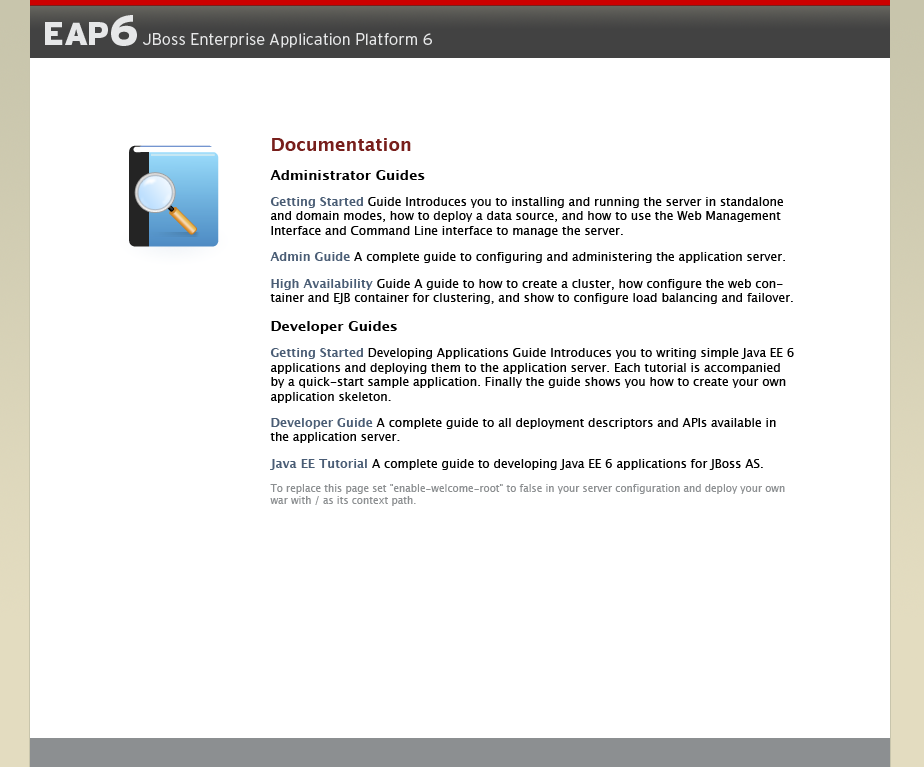
<style>
.page{position:relative;width:924px;height:767px;background:#ffffff}
.page>*{position:absolute;margin:0}
.t1{font:16px "Interstate-Light";color:#e6e7e8}
.t2{font:32px "Interstate-Black";color:#e6e7e8}
.t3{font:42px "Interstate-Black";color:#e6e7e8}
.t4{font:12px "LucidaGrande";color:#000000}
.t5{font:18px "LucidaGrande-Bold";color:#781f1c}
.t6{font:14px "LucidaGrande-Bold";color:#000000}
.t7{font:12px "LucidaGrande-Bold";color:#4a5d75}
.t8{font:10px "LucidaGrande";color:#8c8f91}
</style>
<div class="page">
<p class="t1" style="left:45px;top:15px;width:387px;height:33px"><span class="t2">EAP</span><span class="t3">6</span> JBoss Enterprise Application Platform 6</p>
<p class="t4" style="left:270px;top:138px;width:524px;height:368px"><span class="t5">Documentation<br></span><span class="t6">Administrator Guides<br></span><span class="t7">Getting Started</span> Guide Introduces you to installing and running the server in standalone and domain modes, how to deploy a data source, and how to use the Web Management Interface and Command Line interface to manage the server.<br><span class="t7">Admin Guide</span> A complete guide to configuring and administering the application server.<br><span class="t7">High Availability</span> Guide A guide to how to create a cluster, how configure the web container and EJB container for clustering, and show to configure load balancing and failover.<br><span class="t6">Developer Guides<br></span><span class="t7">Getting Started</span> Developing Applications Guide Introduces you to writing simple Java EE 6 applications and deploying them to the application server. Each tutorial is accompanied by a quick-start sample application. Finally the guide shows you how to create your own application skeleton.<br><span class="t7">Developer Guide</span> A complete guide to all deployment descriptors and APIs available in the application server.<br><span class="t7">Java EE Tutorial </span>A complete guide to developing Java EE 6 applications for JBoss AS.<br><span class="t8">To replace this page set "enable-welcome-root" to false in your server configuration and deploy your own war with / as its context path.</span></p>
</div>
